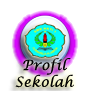
<style>
.page{position:relative;width:92px;height:91px;background:#ffffff}
.page>*{position:absolute;margin:0}
.t1{font:14px "LucidaCalligraphy-Italic";letter-spacing:0.025em;color:#030303}
</style>
<div class="page">
<p class="t1" style="left:15px;top:58px;width:59px;height:30px;text-align:center">Profil<br>Sekolah</p>
</div>
